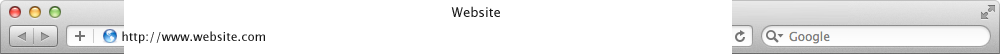
<style>
.page{position:relative;width:1000px;height:54px;background:#ffffff}
.page>*{position:absolute;margin:0}
.t1{font:13px "LucidaGrande";color:#181818}
.t2{font:12px "LucidaGrande";color:#181818}
</style>
<div class="page">
<p class="t1" style="left:451px;top:6px;width:49px;height:11px">Website</p>
<p class="t2" style="left:122px;top:31px;width:143px;height:13px">http://www.website.com</p>
</div>
